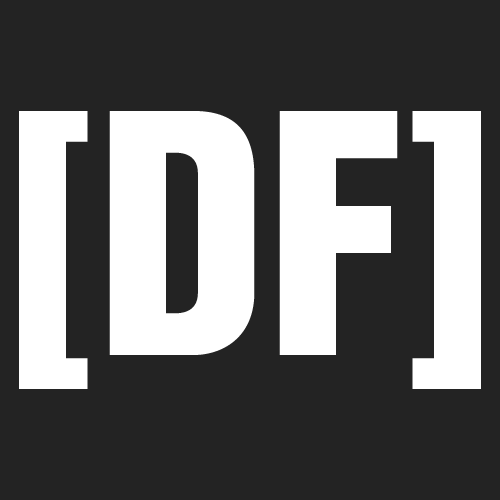
<style>
.page{position:relative;width:500px;height:500px;background:#232323}
.page>*{position:absolute;margin:0}
.t1{font:306px "HelveticaInseratLTStd-Roman";color:#ffffff}
</style>
<div class="page">
<p class="t1" style="left:19px;top:111px;width:462px;height:278px">[DF]</p>
</div>
